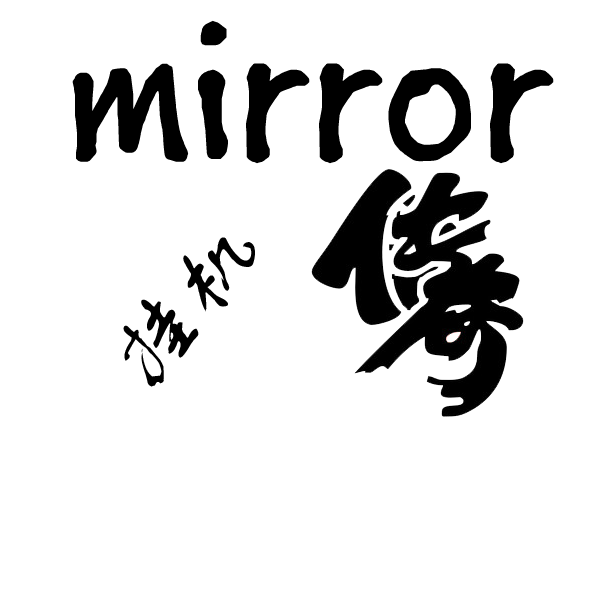
<style>
.page{position:relative;width:600px;height:600px;background:#ffffff}
.page>*{position:absolute;margin:0}
.t1{font:213.3px "BuxtonSketch";color:#000000}
.t2{font:96px "FZSTK--GBK1-0";color:#000000}
</style>
<div class="page">
<p class="t1" style="left:72px;top:20px;width:482px;height:144px">mirror</p>
<p class="t2" style="left:123px;top:237px;width:132px;height:150px;rotate:-46deg">挂机</p>
</div>
